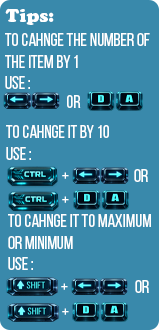
<style>
.page{position:relative;width:159px;height:330px;background:#3989ab}
.page>*{position:absolute;margin:0}
.t1{font:18px "CooperBlackStd";color:#ffffff}
.t2{font:18px "BebasNeue-Regular";color:#ffffff}
</style>
<div class="page">
<p class="t1" style="left:5px;top:8px;width:49px;height:17px">Tips:</p>
<p class="t2" style="left:5px;top:33px;width:145px;height:56px">to Cahnge the number of <br>the Item by 1<br>USE :</p>
<p class="t2" style="left:67px;top:95px;width:14px;height:13px">or</p>
<p class="t2" style="left:6px;top:125px;width:103px;height:35px">to Cahnge it by 10<br>USE :</p>
<p class="t2" style="left:62px;top:172px;width:7px;height:7px">+</p>
<p class="t2" style="left:134px;top:169px;width:14px;height:13px">or</p>
<p class="t2" style="left:62px;top:196px;width:7px;height:7px">+</p>
<p class="t2" style="left:8px;top:214px;width:143px;height:56px">to Cahnge it to Maximum <br>or minimum<br>USE :</p>
<p class="t2" style="left:135px;top:280px;width:14px;height:13px">or</p>
<p class="t2" style="left:61px;top:283px;width:7px;height:7px">+</p>
<p class="t2" style="left:62px;top:308px;width:7px;height:7px">+</p>
</div>
